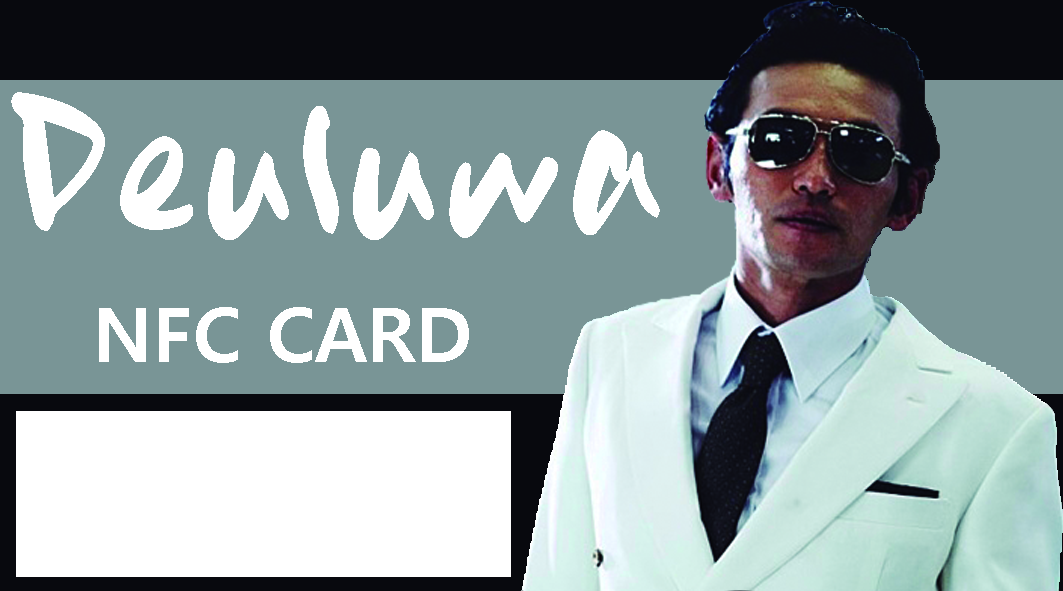
<style>
.page{position:relative;width:1063px;height:591px;background:#799596}
.page>*{position:absolute;margin:0}
.t1{font:208.3px "HSGyoulnoonkot";color:#ffffff}
.t2{font:75px "MalgunGothicBold";color:#ffffff}
</style>
<div class="page">
<p class="t1" style="left:11px;top:92px;width:649px;height:148px">Deuluwa</p>
<p class="t2" style="left:99px;top:307px;width:370px;height:56px">NFC CARD</p>
</div>
